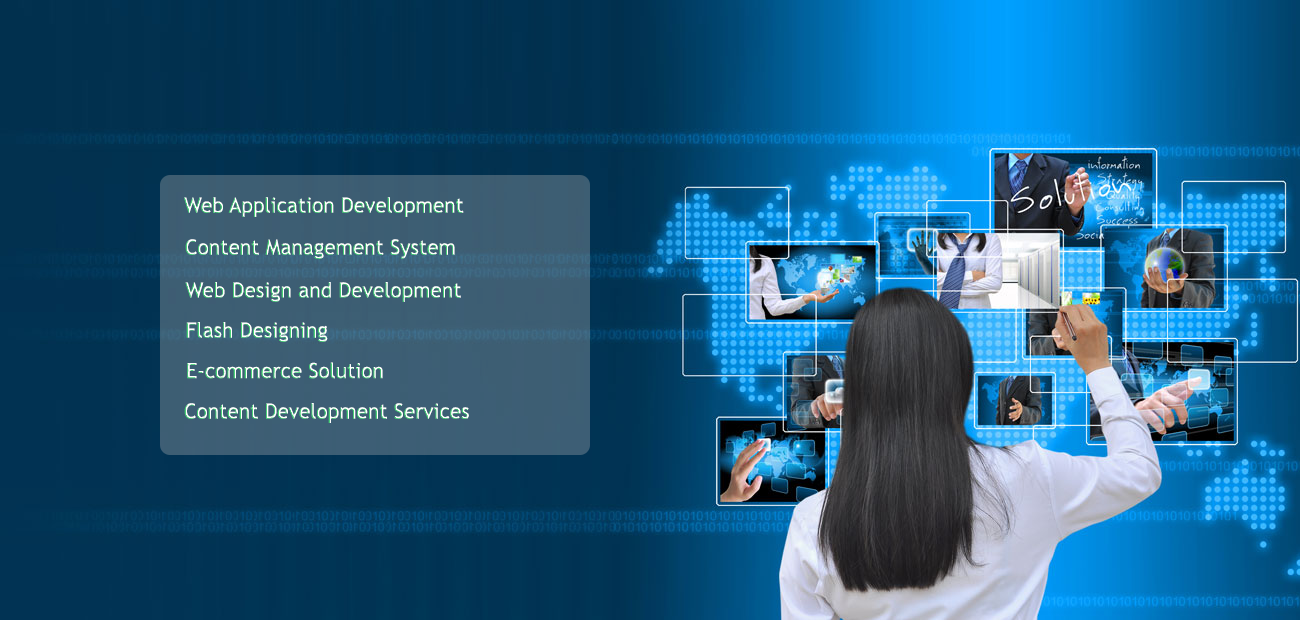
<style>
.page{position:relative;width:1300px;height:620px}
.page>*{position:absolute;margin:0}
.t1{font:20.8px "TrebuchetMS";color:#ffffff}
.t2{font:20.8px "TrebuchetMS"}
</style>
<div class="page">
<p class="t1" style="left:184px;top:197px;width:280px;height:20px">Web Application Development</p>
<p class="t2" style="left:185px;top:239px;width:270px;height:20px">Content Management System</p>
<p class="t2" style="left:185px;top:282px;width:276px;height:20px">Web Design and Development</p>
<p class="t2" style="left:186px;top:322px;width:142px;height:20px">Flash Designing</p>
<p class="t2" style="left:187px;top:362px;width:196px;height:17px">E-commerce Solution</p>
<p class="t2" style="left:184px;top:403px;width:285px;height:20px">Content Development Services</p>
</div>
